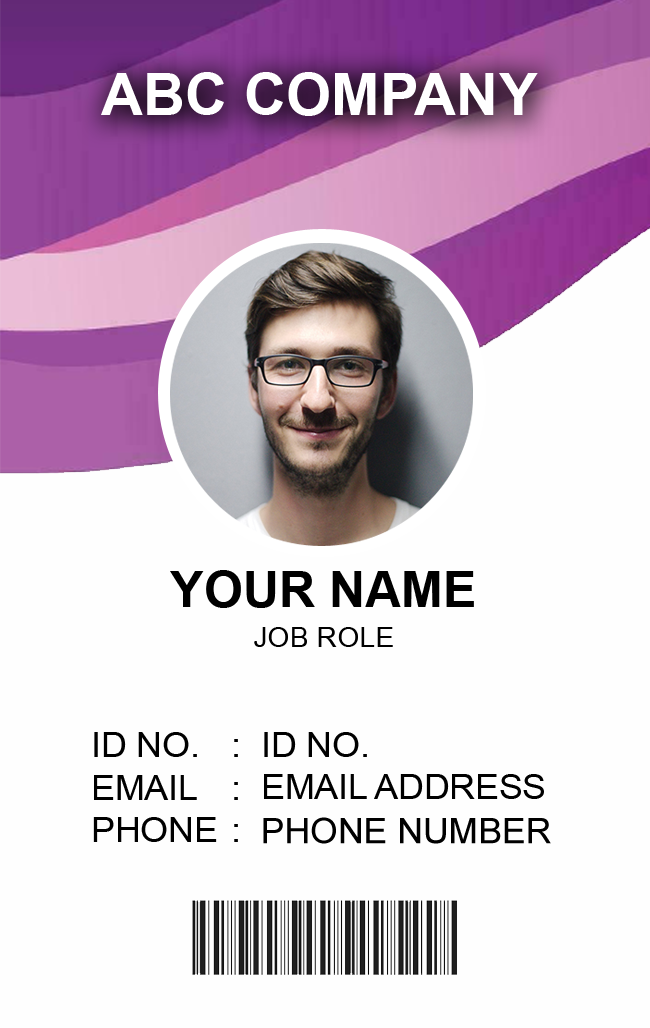
<style>
.page{position:relative;width:650px;height:1028px;background:#fefefe}
.page>*{position:absolute;margin:0}
.t1{font:50px "Arial-BoldMT";color:#000000;text-transform:uppercase}
.t2{font:28.5px "ArialMT";color:#000000;text-transform:uppercase}
.t3{font:35.2px "ArialMT";color:#000000;text-transform:uppercase}
</style>
<div class="page">
<p class="t1" style="left:170px;top:570px;width:304px;height:38px">YOUR NAME</p>
<p class="t2" style="left:254px;top:627px;width:139px;height:20px">Job Role</p>
<p class="t3" style="left:264px;top:732px;width:103px;height:25px">ID No.</p>
<p class="t3" style="left:264px;top:774px;width:280px;height:25px">Email address</p>
<p class="t3" style="left:263px;top:817px;width:288px;height:27px">Phone number</p>
</div>
